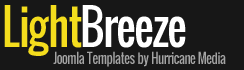
<style>
.page{position:relative;width:244px;height:70px;background:#171717}
.page>*{position:absolute;margin:0}
.t1{font:48px "Oswald";letter-spacing:-0.05em;color:#ffffff;scale:0.9 1}
.t2{font:48px "Oswald";letter-spacing:-0.05em;color:#f4dd1d;scale:0.9 1}
.t3{font:14px "Oswald";letter-spacing:-0.05em;color:#a4a4a4;scale:0.9 1}
</style>
<div class="page">
<p class="t1" style="left:4px;top:5px;width:182px;height:51px"><span class="t2">Light</span>Breeze</p>
<p class="t3" style="left:53px;top:51px;width:173px;height:16px">Joomla Templates by Hurricane Media</p>
</div>
